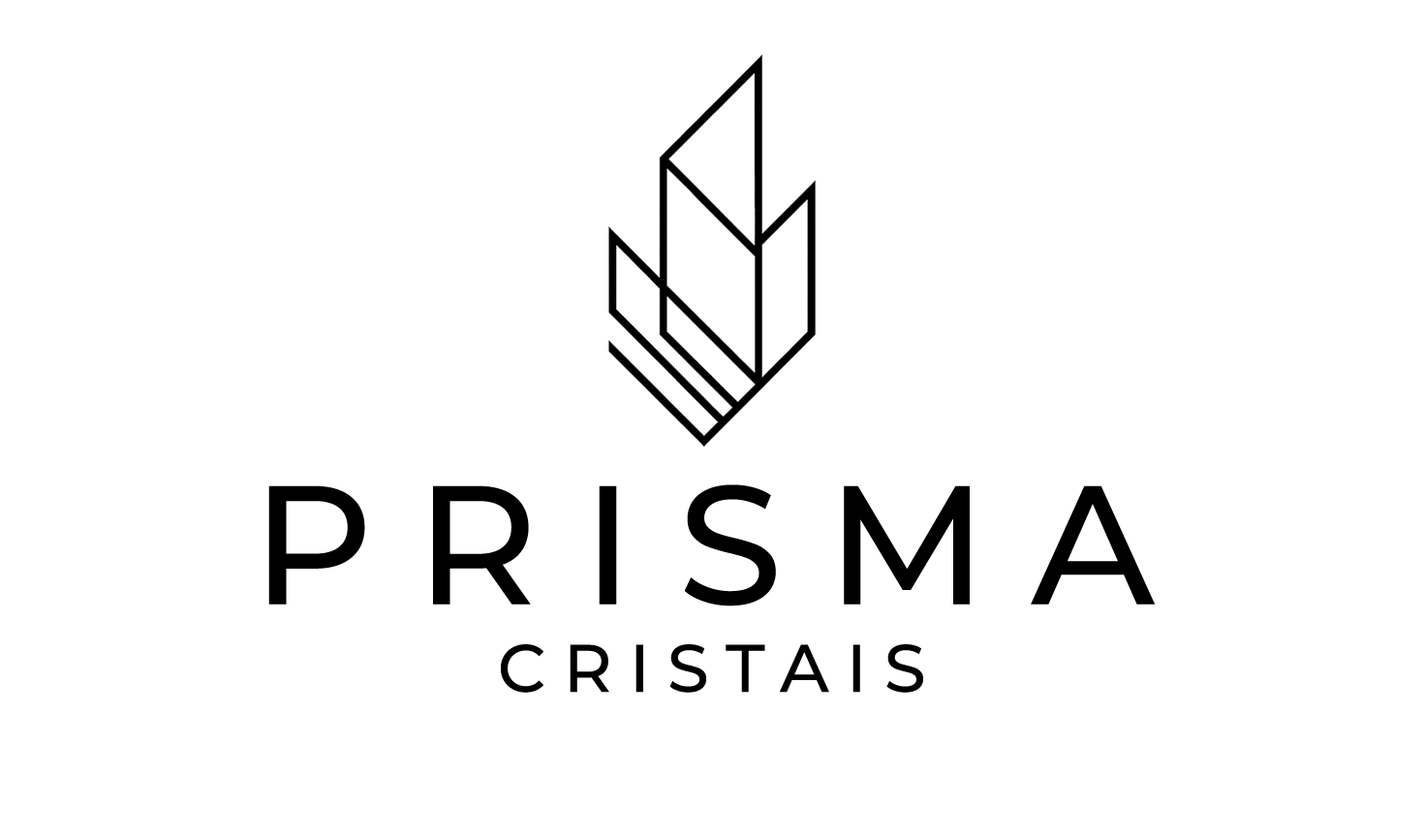
<style>
.page{position:relative;width:1424px;height:838px;background:#ffffff}
.page>*{position:absolute;margin:0}
.t1{font:168.5px "Montserrat-Medium";letter-spacing:0.26em;color:#000000;text-transform:uppercase}
.t2{font:66.8px "Montserrat-Medium";letter-spacing:0.26em;color:#000000;text-transform:uppercase}
</style>
<div class="page">
<p class="t1" style="left:268px;top:484px;width:886px;height:122px">Prisma</p>
<p class="t2" style="left:501px;top:644px;width:422px;height:48px">Cristais</p>
</div>
